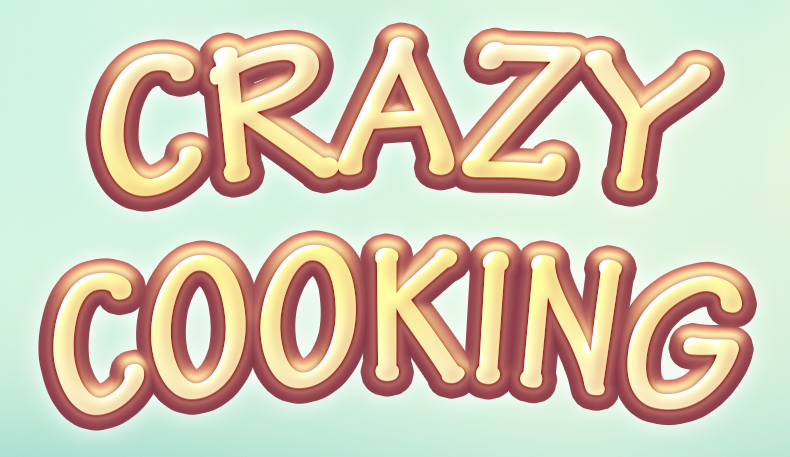
<style>
.page{position:relative;width:790px;height:457px}
.page>*{position:absolute;margin:0}
.t1{font:204.8px/206.8px "TektonPro-BoldCond"}
</style>
<div class="page">
<p class="t1" style="left:53px;top:37px;width:689px;height:379px;text-align:center">CRAZY<br>COOKING</p>
<p class="t1" style="left:53px;top:36px;width:689px;height:379px;text-align:center">CRAZY<br>COOKING</p>
</div>
